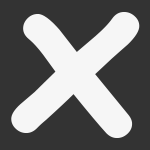
<style>
.page{position:relative;width:150px;height:150px;background:#333333}
.page>*{position:absolute;margin:0}
.t1{font:224px "ComicSansMS-Bold";letter-spacing:0.1em;color:#f6f6f6}
</style>
<div class="page">
<p class="t1" style="left:11px;top:12px;width:129px;height:126px">x</p>
</div>
